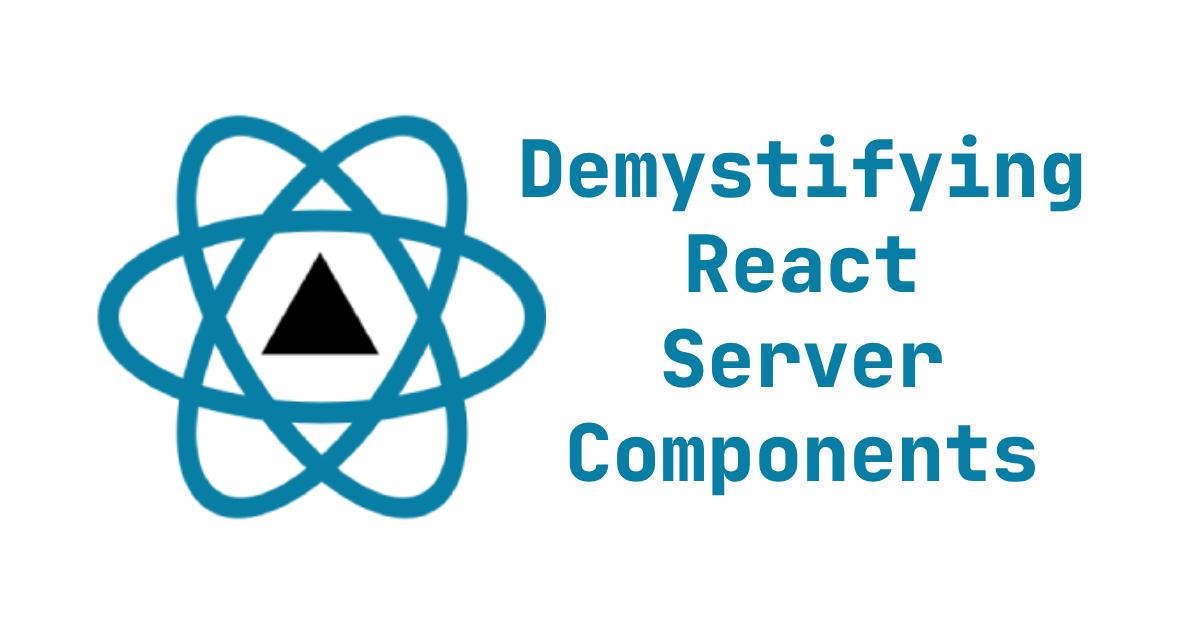
<style>
.page{position:relative;width:1200px;height:630px;background:#ffffff}
.page>*{position:absolute;margin:0}
.t1{font:79px "JetBrainsMono-ExtraBold";color:#087ea4}
</style>
<div class="page">
<p class="t1" style="left:522px;top:134px;width:560px;height:362px;text-align:center">Demystifying<br>React<br>Server<br>Components</p>
</div>
